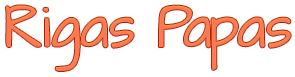
<style>
.page{position:relative;width:295px;height:77px;background:#ffffff}
.page>*{position:absolute;margin:0}
.t1{font:50px "ArchitectsDaughter";color:#fc7a54;scale:0.9 1}
</style>
<div class="page">
<p class="t1" style="left:6px;top:5px;width:285px;height:66px">Rigas Papas</p>
</div>
